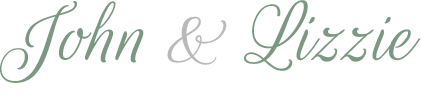
<style>
.page{position:relative;width:421px;height:95px;background:#ffffff}
.page>*{position:absolute;margin:0}
.t1{font:90px "RougeScript-Regular";color:#7b9883;font-style:italic}
.t2{font:90px "RougeScript-Regular";color:#b9b9b9;font-style:italic}
</style>
<div class="page">
<p class="t1" style="left:0px;top:0px;width:421px;height:83px">John <span class="t2">&amp; </span>Lizzie</p>
</div>
